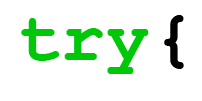
<style>
.page{position:relative;width:202px;height:101px;background:#ffffff}
.page>*{position:absolute;margin:0}
.t1{font:73px "CourierNewPS-BoldMT";letter-spacing:0.02em;color:#00c809}
.t2{font:73px "CourierNewPS-BoldMT";letter-spacing:0.02em;color:#000000}
</style>
<div class="page">
<p class="t1" style="left:21px;top:15px;width:163px;height:59px">try<span class="t2">{</span></p>
</div>
